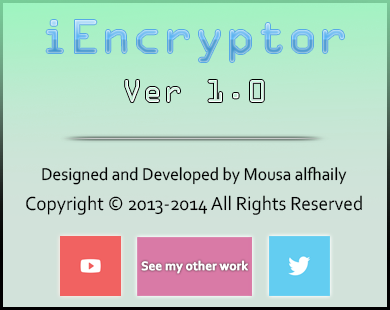
<style>
.page{position:relative;width:390px;height:310px}
.page>*{position:absolute;margin:0}
.t1{font:43px "OCRAStd"}
.t2{font:28px "OCRAStd";letter-spacing:0.02em;color:#d7fde7}
.t3{font:18px "Corbel";color:#000000;scale:0.96 1}
.t4{font:20px "Corbel";color:#000000;scale:0.96 1}
.t5{font:13px "Corbel-Bold";color:#ffffff;font-weight:bold;scale:0.96 1}
</style>
<div class="page">
<p class="t1" style="left:46px;top:20px;width:298px;height:42px">iEncryptor</p>
<p class="t2" style="left:125px;top:80px;width:139px;height:22px">Ver 1.0</p>
<p class="t3" style="left:42px;top:166px;width:305px;height:19px">Designed and Developed by Mousa alfhaily</p>
<p class="t4" style="left:26px;top:195px;width:336px;height:20px">Copyright © 2013-2014 All Rights Reserved</p>
<p class="t5" style="left:141px;top:260px;width:107px;height:14px">See my other work</p>
</div>
